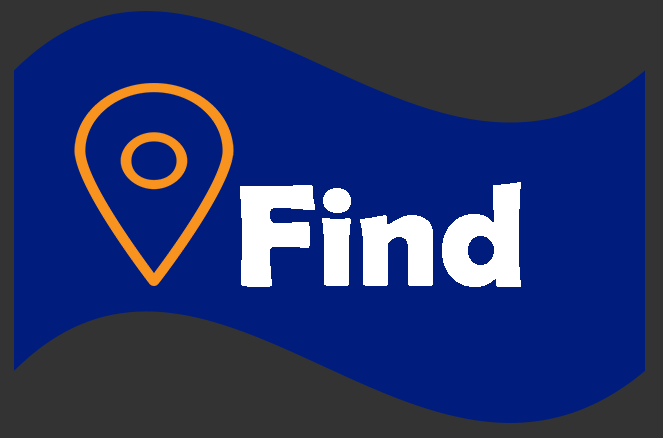
<style>
.page{position:relative;width:663px;height:438px;background:#001d7e}
.page>*{position:absolute;margin:0}
.t1{font:146.6px "BerlinSansFBDemi-Bold";color:#ffffff}
</style>
<div class="page">
<p class="t1" style="left:240px;top:182px;width:281px;height:105px">Find</p>
</div>
